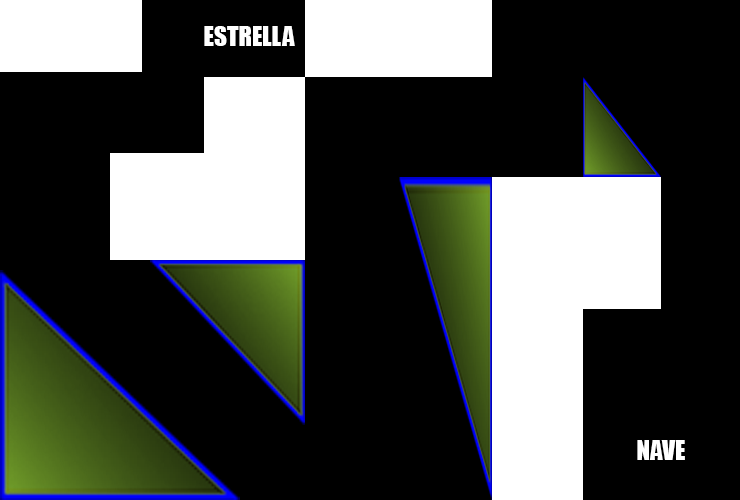
<style>
.page{position:relative;width:740px;height:500px;background:#000000}
.page>*{position:absolute;margin:0}
.t1{font:25px "Impact";color:#ffffff}
</style>
<div class="page">
<p class="t1" style="left:204px;top:26px;width:91px;height:20px">ESTRELLA</p>
<p class="t1" style="left:637px;top:440px;width:48px;height:20px">NAVE</p>
</div>
